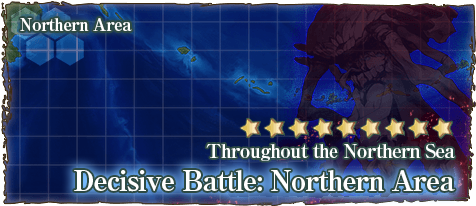
<style>
.page{position:relative;width:476px;height:206px}
.page>*{position:absolute;margin:0}
.t1{font:17px "RyuminPro-ExBold";letter-spacing:-0.04em;color:#ffffff}
.t2{font:19px "RyuminPro-ExBold";letter-spacing:-0.04em;color:#ffffff}
.t3{font:28px "RyuminPro-ExBold";letter-spacing:-0.04em;color:#ffffff}
</style>
<div class="page">
<p class="t1" style="left:20px;top:18px;width:112px;height:13px">Northern Area</p>
<p class="t2" style="left:206px;top:143px;width:249px;height:18px">Throughout the Northern Sea</p>
<p class="t3" style="left:74px;top:170px;width:381px;height:22px">Decisive Battle: Northern Area</p>
</div>
